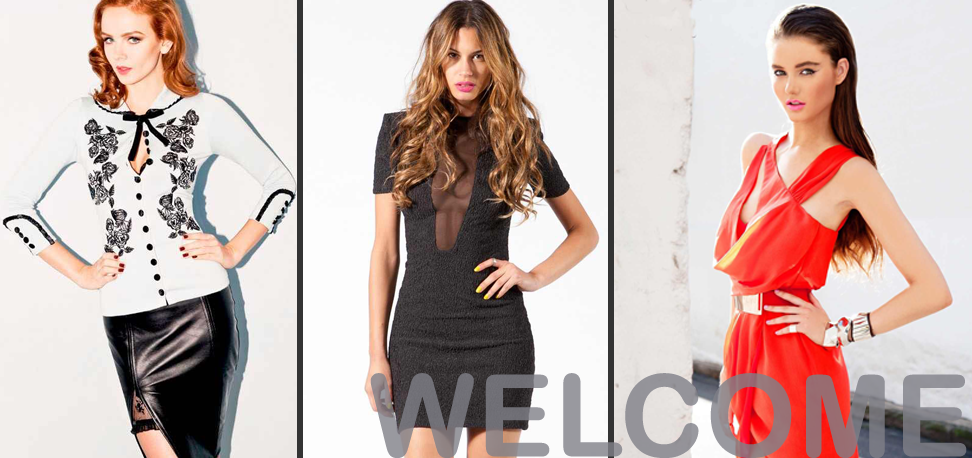
<style>
.page{position:relative;width:972px;height:458px}
.page>*{position:absolute;margin:0}
.t1{font:113.6px "ArialRoundedMTBold";letter-spacing:-0.01em;color:#808088;font-weight:bold}
</style>
<div class="page">
<p class="t1" style="left:370px;top:373px;width:597px;height:85px">WELCOME</p>
</div>
